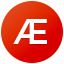
<style>
.page{position:relative;width:64px;height:64px;background:#ffffff}
.page>*{position:absolute;margin:0}
.t1{font:34.9px "Gotham-Medium";letter-spacing:0.02em;color:#ffffff}
</style>
<div class="page">
<p class="t1" style="left:13px;top:19px;width:34px;height:25px">Æ</p>
</div>
